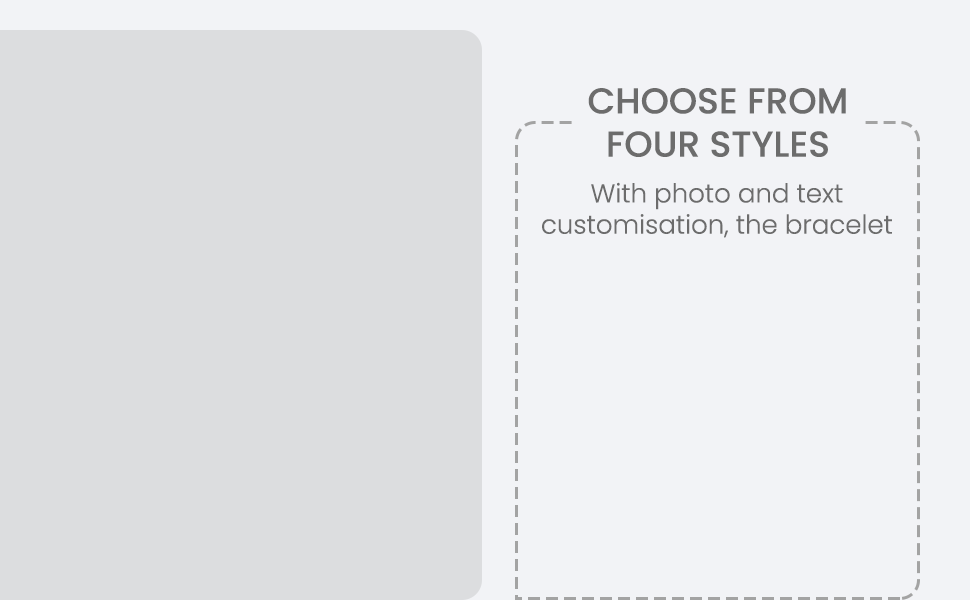
<style>
.page{position:relative;width:970px;height:600px;background:#f2f3f6}
.page>*{position:absolute;margin:0}
.t1{font:36px "Poppins-Medium";color:#6c6c6c}
.t2{font:26px "Poppins-Light";color:#6c6c6c}
</style>
<div class="page">
<p class="t1" style="left:588px;top:88px;width:258px;height:69px;text-align:center">CHOOSE FROM<br>FOUR STYLES</p>
<p class="t2" style="left:542px;top:182px;width:350px;height:56px;text-align:center">With photo and text<br>customisation, the bracelet</p>
</div>
